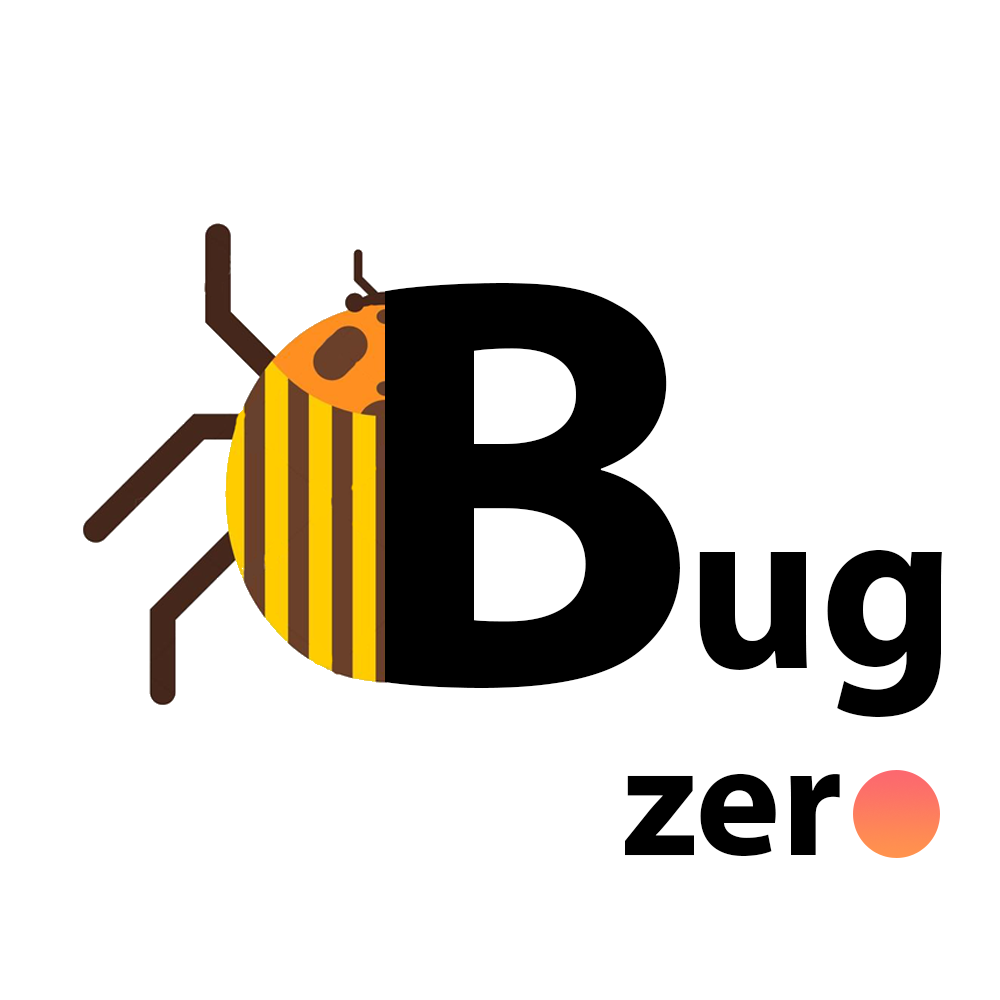
<style>
.page{position:relative;width:1000px;height:1000px;background:#ffffff}
.page>*{position:absolute;margin:0}
.t1{font:590px "MyriadPro-Bold";color:#000000}
.t2{font:236.4px "MyriadPro-Bold";color:#000000}
.t3{font:162.2px "MyriadPro-Bold";color:#000000}
</style>
<div class="page">
<p class="t1" style="left:385px;top:283px;width:295px;height:406px">B</p>
<p class="t2" style="left:699px;top:550px;width:243px;height:168px">ug</p>
<p class="t3" style="left:625px;top:773px;width:215px;height:84px">zer</p>
</div>
